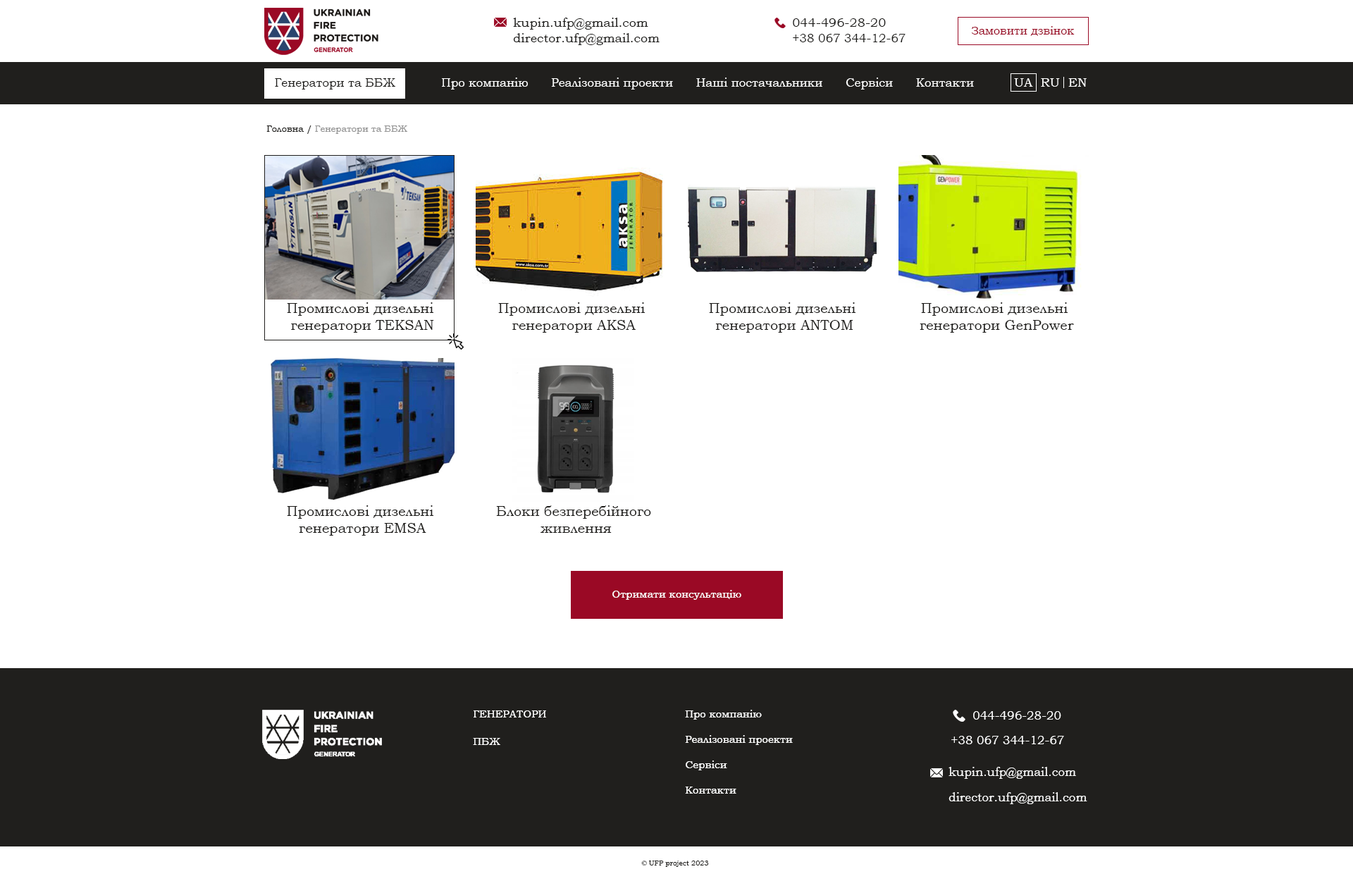
<style>
.page{position:relative;width:1353px;height:881px;background:#ffffff}
.page>*{position:absolute;margin:0}
.t1{font:12.7px/15.5px "BookmanOldStyle";color:#201f1d}
.t2{font:12px/15.5px "BookmanOldStyle";color:#201f1d}
.t3{font:11.3px "BookmanOldStyle";color:#9a0925}
.t4{font:12px "BookmanOldStyle";color:#ffffff}
.t5{font:12px "BookmanOldStyle";color:#201f1d}
.t6{font:12.7px "BookmanOldStyle";color:#ffffff}
.t7{font:9.2px "BookmanOldStyle";color:#959595}
.t8{font:9.2px "BookmanOldStyle";color:#201f1d}
.t9{font:14.1px "BookmanOldStyle";color:#201f1d}
.t10{font:14.1px "BookmanOldStyle";color:#201f1d;text-transform:uppercase}
.t11{font:10.6px "BookmanOldStyle";color:#ffffff}
.t12{font:10.6px/27.5px "BookmanOldStyle";color:#fefefe;text-transform:uppercase}
.t13{font:10.6px/27.5px "BookmanOldStyle";color:#fefefe}
.t14{font:10.6px/25.4px "BookmanOldStyle";color:#ffffff}
.t15{font:12px/25.4px "BookmanOldStyle";color:#ffffff}
.t16{font:7px "BookmanOldStyle";color:#201f1d}
</style>
<div class="page">
<p class="t1" style="left:513px;top:18px;width:147px;height:27px">kupin.ufp@gmail.com<br>director.ufp@gmail.com</p>
<p class="t2" style="left:793px;top:18px;width:113px;height:24px"><span class="t1">044-496-28-20<br></span>+38 067 344-12-67</p>
<p class="t3" style="left:972px;top:26px;width:103px;height:10px">Замовити дзвінок</p>
<p class="t4" style="left:442px;top:78px;width:532px;height:12px">Про компанію      Реалізовані проекти      Наші постачальники      Сервіси      Контакти</p>
<p class="t5" style="left:275px;top:78px;width:120px;height:12px">Генератори та ББЖ</p>
<p class="t6" style="left:1014px;top:78px;width:19px;height:9px">UA</p>
<p class="t6" style="left:1041px;top:78px;width:19px;height:9px">RU</p>
<p class="t6" style="left:1069px;top:78px;width:18px;height:9px">EN</p>
<p class="t7" style="left:266px;top:125px;width:141px;height:9px"><span class="t8">Головна / </span>Генератори та ББЖ</p>
<p class="t9" style="left:287px;top:302px;width:147px;height:31px;text-align:center">Промислові дизельні <br>генератори TEKSAN</p>
<p class="t9" style="left:498px;top:302px;width:148px;height:31px;text-align:center">Промислові дизельні <br>генератори AKSA</p>
<p class="t9" style="left:709px;top:302px;width:147px;height:31px;text-align:center">Промислові дизельні <br>генератори <span class="t10">Antom</span></p>
<p class="t9" style="left:920px;top:302px;width:154px;height:31px;text-align:center">Промислові дизельні <br>генератори GenPower</p>
<p class="t9" style="left:287px;top:505px;width:147px;height:31px;text-align:center">Промислові дизельні <br>генератори EMSA</p>
<p class="t9" style="left:496px;top:505px;width:155px;height:28px;text-align:center">Блоки безперебійного<br> живлення</p>
<p class="t11" style="left:613px;top:590px;width:129px;height:10px">Отримати консультацію</p>
<p class="t12" style="left:473px;top:711px;width:73px;height:34px">Генератори<br><span class="t13">ПБЖ</span></p>
<p class="t14" style="left:685px;top:710px;width:108px;height:84px">Про компанію<br>Реалізовані проекти<br>Сервіси<br>Контакти</p>
<p class="t4" style="left:973px;top:711px;width:89px;height:9px">044-496-28-20</p>
<p class="t4" style="left:952px;top:736px;width:112px;height:8px">+38 067 344-12-67</p>
<p class="t15" style="left:949px;top:767px;width:139px;height:37px">kupin.ufp@gmail.com<br>director.ufp@gmail.com</p>
<p class="t16" style="left:641px;top:861px;width:68px;height:6px">© UFP project 2023</p>
</div>
